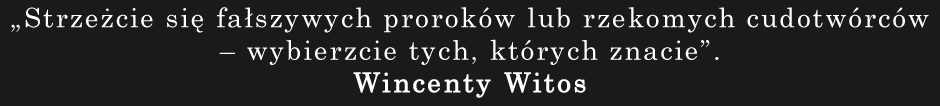
<style>
.page{position:relative;width:940px;height:106px;background:#1a1a1a}
.page>*{position:absolute;margin:0}
.t1{font:27px "Century";letter-spacing:0.075em;color:#ffffff}
.t2{font:21.9px "LucidaConsole";letter-spacing:0.075em;color:#ffffff;font-weight:bold}
.t3{font:27px "Century";letter-spacing:0.075em;color:#ffffff;font-weight:bold}
</style>
<div class="page">
<p class="t1" style="left:11px;top:7px;width:918px;height:91px;text-align:center"><span class="t2"><br><br></span>„Strzeżcie się fałszywych proroków lub rzekomych cudotwórców<br>– wybierzcie tych, których znacie”.<br><span class="t3">Wincenty Witos</span></p>
</div>
